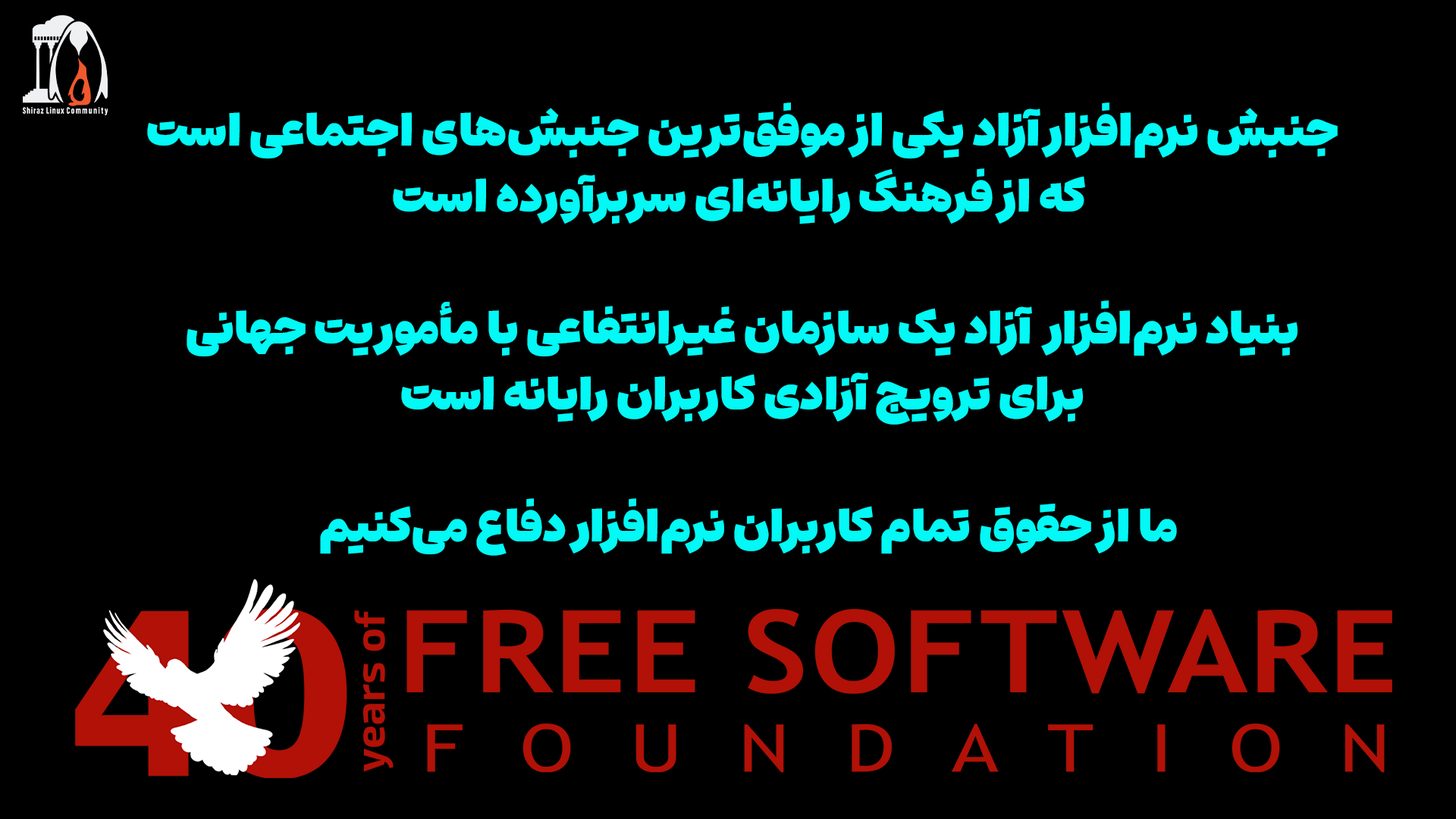
<style>
.page{position:relative;width:1456px;height:819px;background:#000000}
.page>*{position:absolute;margin:0}
.t1{font:44.7px/66px "EstedadMad-Fat";letter-spacing:0.01em;color:#02f9f5}
</style>
<div class="page">
<p class="t1" style="left:147px;top:102px;width:1191px;height:454px;text-align:center">جنبش نرم‌افزار آزاد یکی از موفق‌ترین جنبش‌های اجتماعی است<br> که از فرهنگ رایانه‌ای سربرآورده است<br><br>بنیاد نرم‌افزار  آزاد یک سازمان غیرانتفاعی با مأموریت جهانی<br>برای ترویج آزادی کاربران رایانه است<br><br>ما از حقوق تمام کاربران نرم‌افزار دفاع می‌کنیم</p>
</div>
